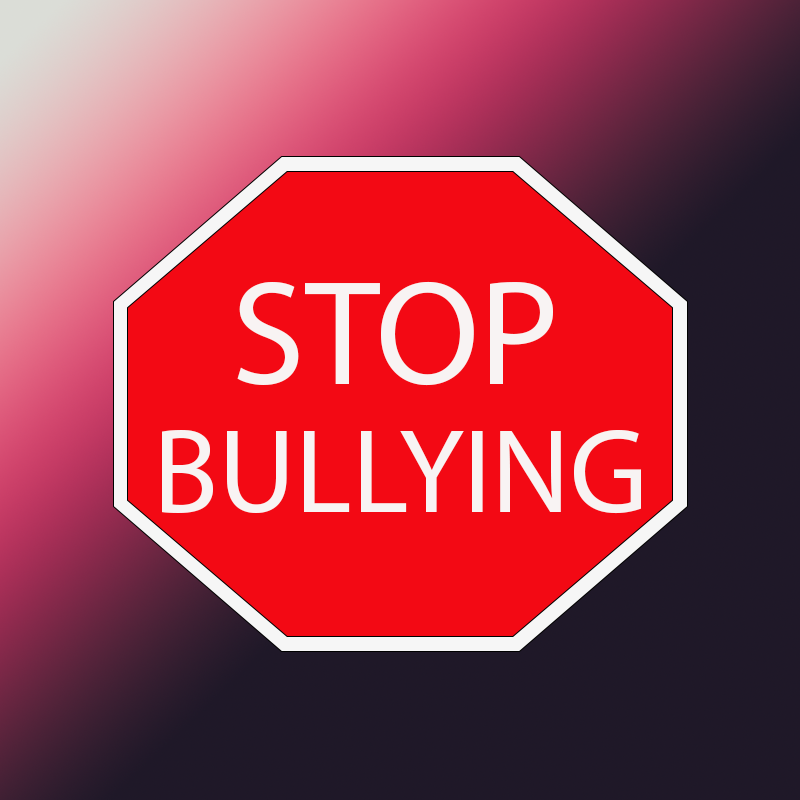
<style>
.page{position:relative;width:800px;height:800px;background:#f30914}
.page>*{position:absolute;margin:0}
.t1{font:150px "MyriadPro-Regular";color:#f8f3f3}
.t2{font:120px "MyriadPro-Regular";color:#f8f3f3}
</style>
<div class="page">
<p class="t1" style="left:237px;top:281px;width:316px;height:105px">STOP</p>
<p class="t2" style="left:162px;top:430px;width:479px;height:84px">BULLYING</p>
</div>
